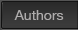
<style>
.page{position:relative;width:78px;height:30px}
.page>*{position:absolute;margin:0}
.t1{font:14px "HelveticaNeue";color:#aeacac}
</style>
<div class="page">
<p class="t1" style="left:14px;top:10px;width:50px;height:10px">Authors</p>
</div>
